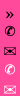
<style>
.page{position:relative;width:20px;height:96px;background:#ff499a}
.page>*{position:absolute;margin:0}
.t1{font:18px "Palatino-Roman";color:#000000}
.t2{font:14px "ZapfDingbatsITC";color:#000000}
.t3{font:18px "ZapfDingbatsITC";color:#000000}
.t4{font:14px "ZapfDingbatsITC";color:#ffffff}
.t5{font:18px "ZapfDingbatsITC";color:#ffffff}
</style>
<div class="page">
<p class="t1" style="left:4px;top:11px;width:12px;height:83px;text-align:center">»<br><span class="t2">✆<br></span><span class="t3">✉<br></span><span class="t4">✆<br></span><span class="t5">✉</span></p>
</div>
